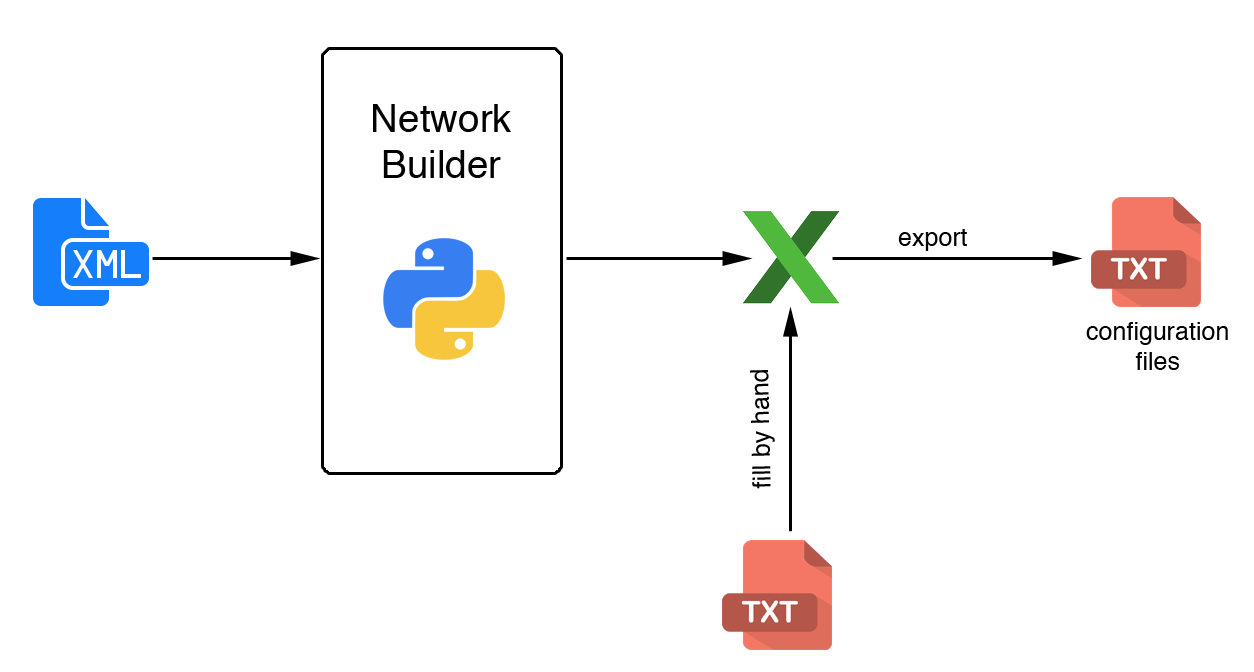
<style>
.page{position:relative;width:1254px;height:672px;background:#ffffff}
.page>*{position:absolute;margin:0}
.t1{font:38.5px "Helvetica";color:#000000}
.t2{font:25px "Helvetica";color:#000000}
</style>
<div class="page">
<p class="t1" style="left:373px;top:104px;width:138px;height:74px;text-align:center">Network<br>Builder</p>
<p class="t2" style="left:898px;top:229px;width:69px;height:22px">export</p>
<p class="t2" style="left:1086px;top:322px;width:142px;height:48px;text-align:center">configuration<br>files</p>
<p class="t2" style="left:750px;top:370px;width:25px;height:119px;rotate:-91deg">fill by hand</p>
</div>
